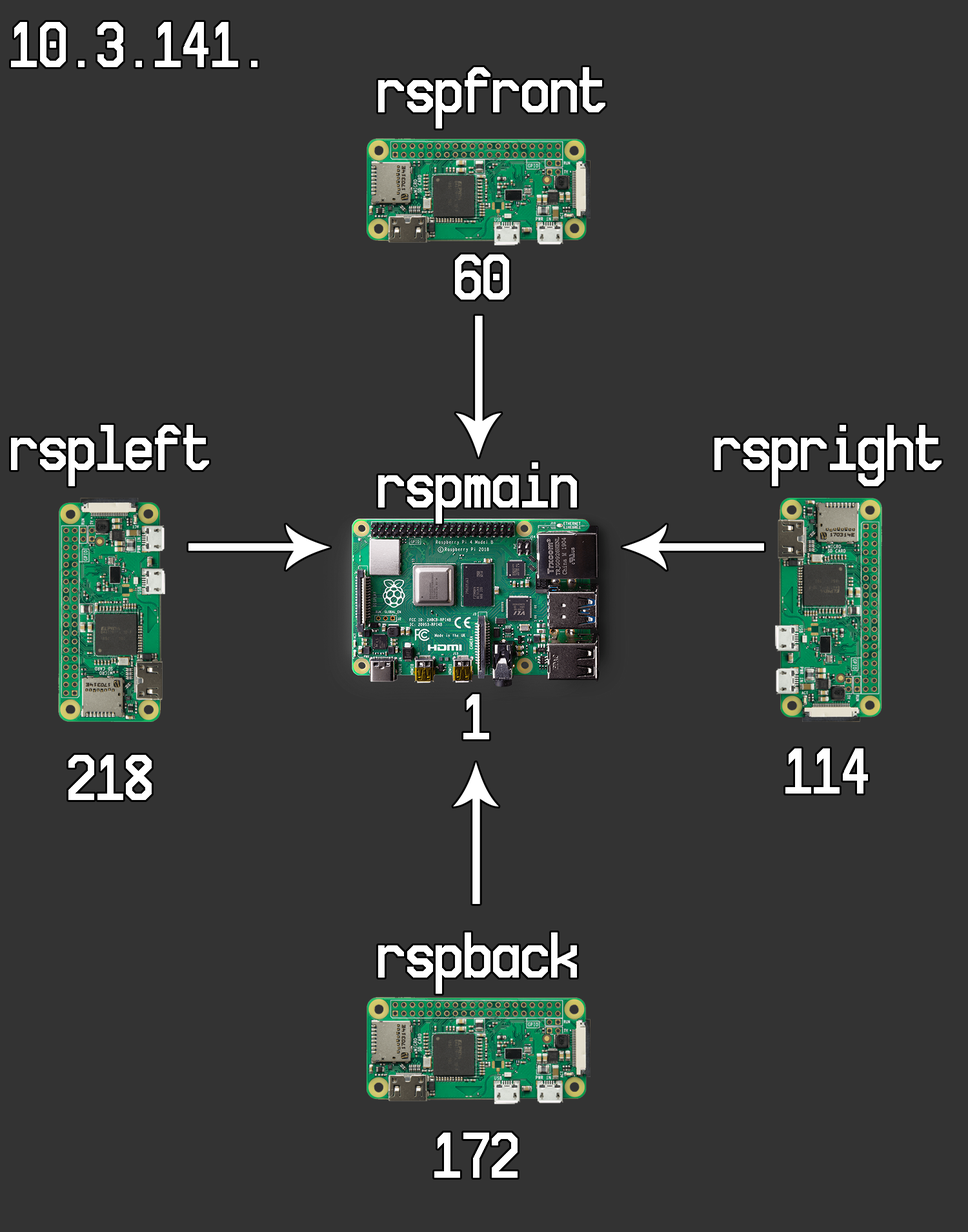
<style>
.page{position:relative;width:968px;height:1232px;background:#333333}
.page>*{position:absolute;margin:0}
.t1{font:102.5px "NovaMono";color:#ffffff}
.t2{font:102.3px "NovaMono";color:#ffffff}
</style>
<div class="page">
<p class="t1" style="left:11px;top:22px;width:247px;height:45px">10.3.141.</p>
<p class="t1" style="left:378px;top:67px;width:227px;height:61px">rspfront</p>
<p class="t1" style="left:455px;top:254px;width:54px;height:46px">60</p>
<p class="t1" style="left:11px;top:425px;width:198px;height:61px">rspleft</p>
<p class="t1" style="left:715px;top:425px;width:227px;height:61px">rspright</p>
<p class="t1" style="left:378px;top:462px;width:199px;height:61px">rspmain</p>
<p class="t1" style="left:463px;top:694px;width:26px;height:45px">1</p>
<p class="t1" style="left:786px;top:748px;width:82px;height:45px">114</p>
<p class="t1" style="left:68px;top:755px;width:84px;height:45px">218</p>
<p class="t2" style="left:378px;top:932px;width:199px;height:61px">rspback</p>
<p class="t1" style="left:434px;top:1132px;width:84px;height:45px">172</p>
</div>
